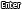
<style>
.page{position:relative;width:22px;height:9px;background:#ffffff}
.page>*{position:absolute;margin:0}
.t1{font:8px "KohinoorBangla-Regular";color:#ffffff}
</style>
<div class="page">
<p class="t1" style="left:1px;top:1px;width:20px;height:7px">Enter</p>
</div>
